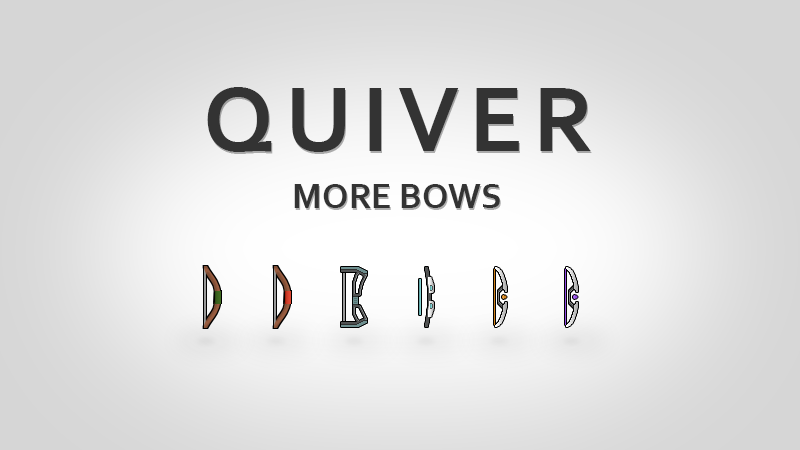
<style>
.page{position:relative;width:800px;height:450px}
.page>*{position:absolute;margin:0}
.t1{font:96px "Corbel-Bold";letter-spacing:0.1em;color:#333333}
.t2{font:36px "Corbel-Bold";color:#333333}
</style>
<div class="page">
<p class="t1" style="left:207px;top:87px;width:384px;height:65px">QUIVER</p>
<p class="t2" style="left:294px;top:184px;width:206px;height:24px">MORE BOWS</p>
</div>
